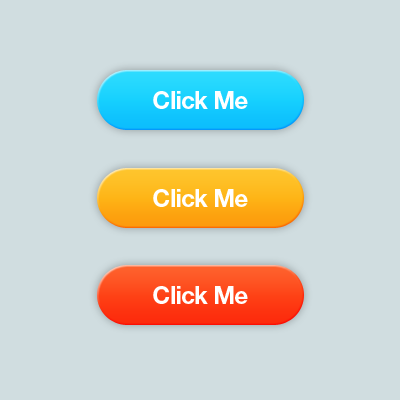
<style>
.page{position:relative;width:400px;height:400px;background:#d0dde0}
.page>*{position:absolute;margin:0}
.t1{font:24px "HelveticaNeue-Bold";letter-spacing:-0.025em;color:#ffffff}
</style>
<div class="page">
<p class="t1" style="left:153px;top:91px;width:95px;height:18px">Click Me</p>
<p class="t1" style="left:153px;top:189px;width:95px;height:18px">Click Me</p>
<p class="t1" style="left:153px;top:286px;width:95px;height:18px">Click Me</p>
</div>
